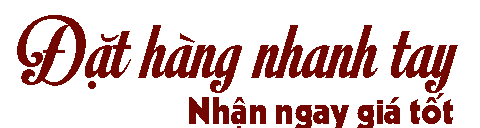
<style>
.page{position:relative;width:480px;height:128px;background:#ffffff}
.page>*{position:absolute;margin:0}
.t1{font:85.3px "SVN-MotionPicture";color:#720701}
</style>
<div class="page">
<p class="t1" style="left:17px;top:15px;width:441px;height:78px">Đặt hàng nhanh tay</p>
</div>
